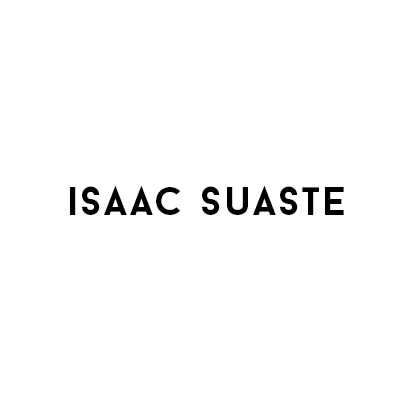
<style>
.page{position:relative;width:411px;height:411px;background:#ffffff}
.page>*{position:absolute;margin:0}
.t1{font:40px "BaronNeueBold";letter-spacing:0.05em;color:#010000}
</style>
<div class="page">
<p class="t1" style="left:70px;top:186px;width:274px;height:29px">isaac suaste</p>
</div>
